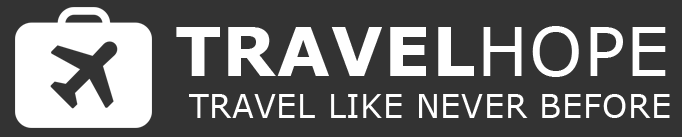
<style>
.page{position:relative;width:682px;height:137px;background:#333333}
.page>*{position:absolute;margin:0}
.t1{font:68px "Verdana-Bold";letter-spacing:0.02em;color:#ffffff}
.t2{font:68px "Verdana";letter-spacing:0.02em;color:#ffffff}
.t3{font:32px "Verdana";letter-spacing:0.02em;color:#ffffff}
</style>
<div class="page">
<p class="t1" style="left:176px;top:26px;width:490px;height:51px">TRAVEL<span class="t2">HOPE</span></p>
<p class="t3" style="left:189px;top:94px;width:481px;height:24px">TRAVEL LIKE NEVER BEFORE</p>
</div>
